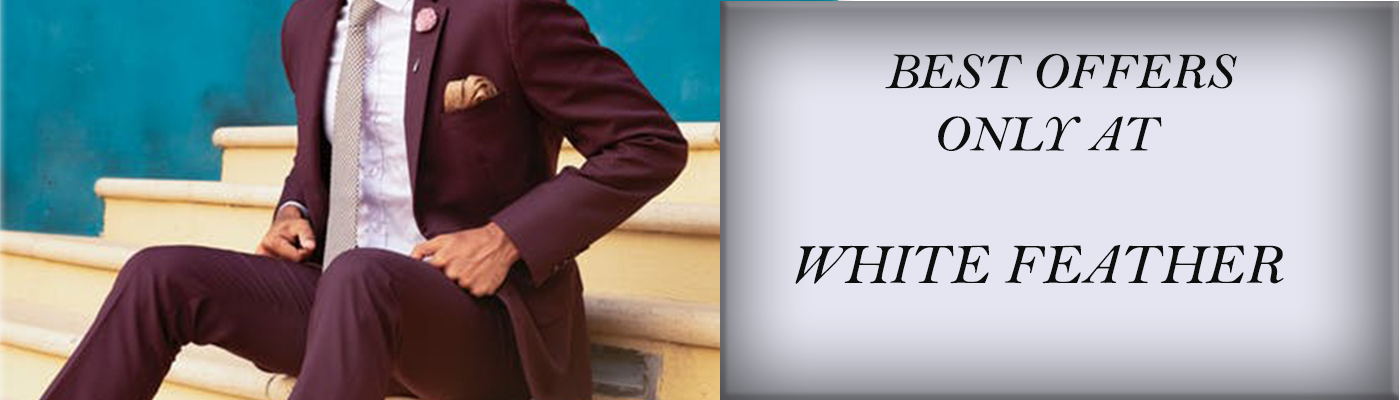
<style>
.page{position:relative;width:1400px;height:400px}
.page>*{position:absolute;margin:0}
.t1{font:52.1px "BellMTItalic";color:#0e0e0f}
.t2{font:68.8px "BellMTItalic";color:#0e0e0f}
.t3{font:58.3px "BellMTItalic";color:#0e0e0f}
</style>
<div class="page">
<p class="t1" style="left:795px;top:53px;width:489px;height:231px"><span class="t2">  </span>BEST OFFERS <br>   ONLY AT<br><br><span class="t3">WHITE FEATHER</span></p>
</div>
